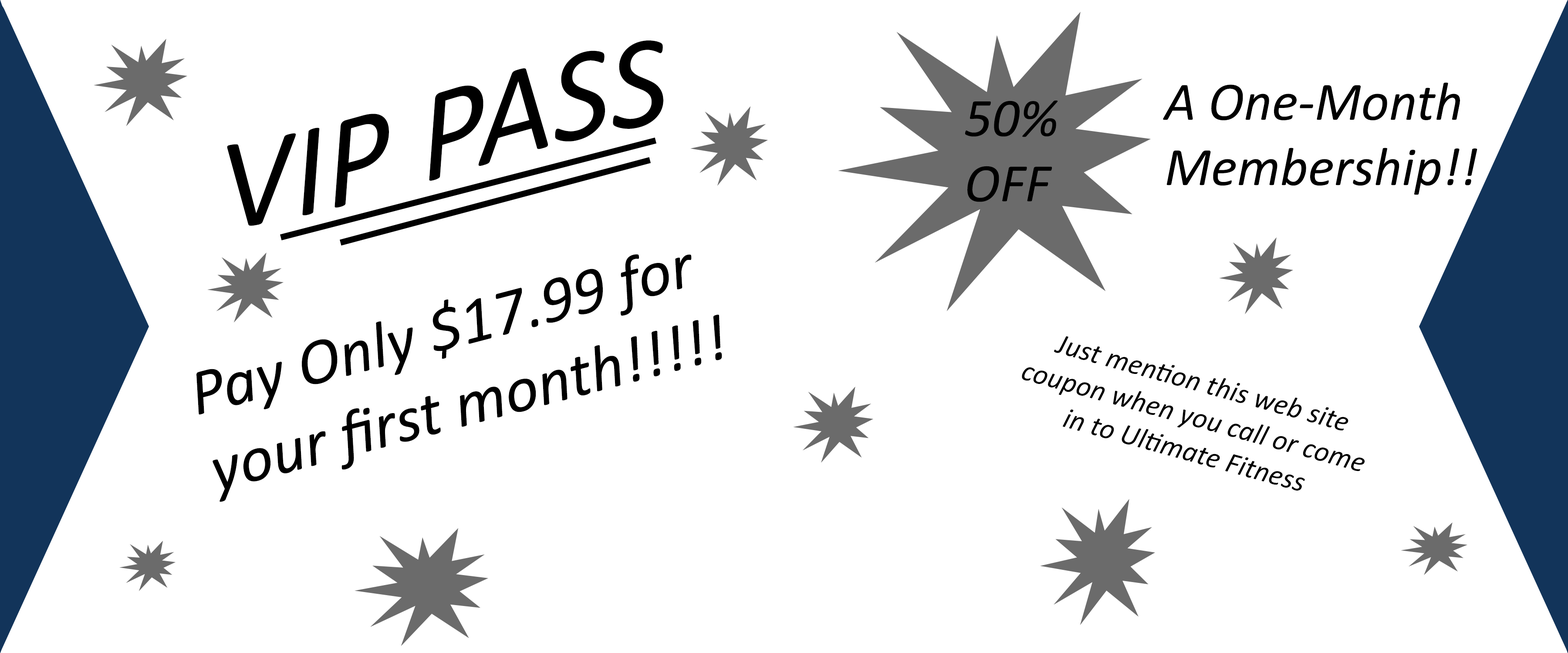
<style>
.page{position:relative;width:1568px;height:653px;background:#ffffff}
.page>*{position:absolute;margin:0}
.t1{font:130.7px "Calibri-Italic";color:#000000}
.t2{font:54.4px "Calibri-Italic";color:#000000}
.t3{font:65.3px "Calibri-Italic";color:#000000}
.t4{font:29px "Calibri-Italic";color:#000000}
</style>
<div class="page">
<p class="t1" style="left:227px;top:41px;width:436px;height:185px;rotate:-7deg">VIP PASS</p>
<p class="t2" style="left:1163px;top:82px;width:314px;height:113px">A One-Month<br>Membership!!</p>
<p class="t2" style="left:965px;top:100px;width:93px;height:102px">50%<br>OFF</p>
<p class="t3" style="left:196px;top:254px;width:526px;height:248px;rotate:-15deg">Pay Only $17.99 for <br>your first month!!!!!</p>
<p class="t4" style="left:1022px;top:336px;width:343px;height:155px;text-align:center;rotate:15deg">Just mention this web site<br>coupon when you call or come<br>in to Ultimate Fitness</p>
</div>
